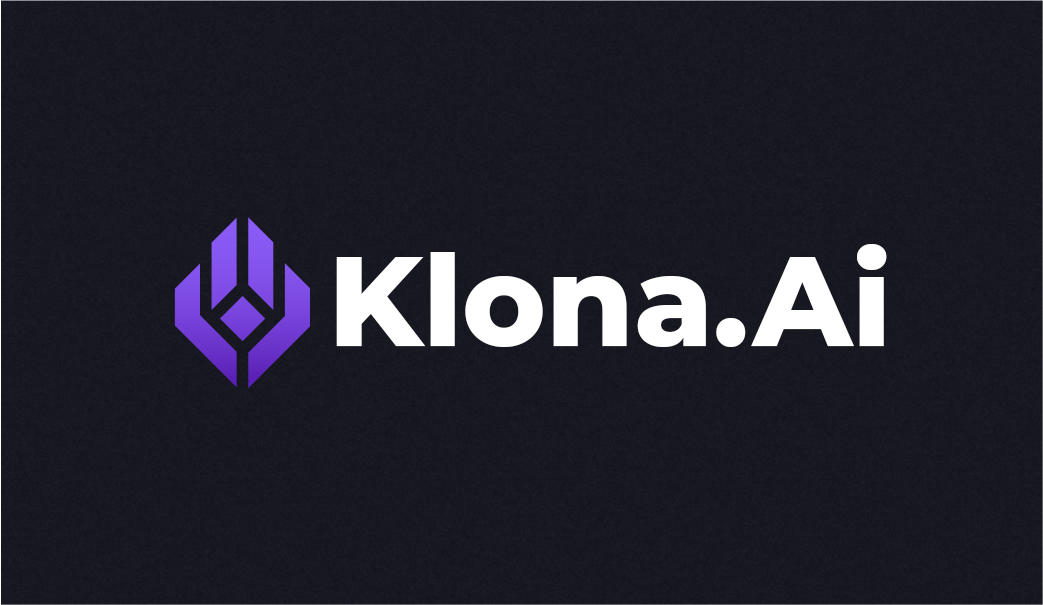
<style>
.page{position:relative;width:1043px;height:605px}
.page>*{position:absolute;margin:0}
.t1{font:126.1px "Montserrat-ExtraBold";color:#ffffff}
</style>
<div class="page">
<p class="t1" style="left:336px;top:244px;width:551px;height:103px">Klona.Ai</p>
</div>
